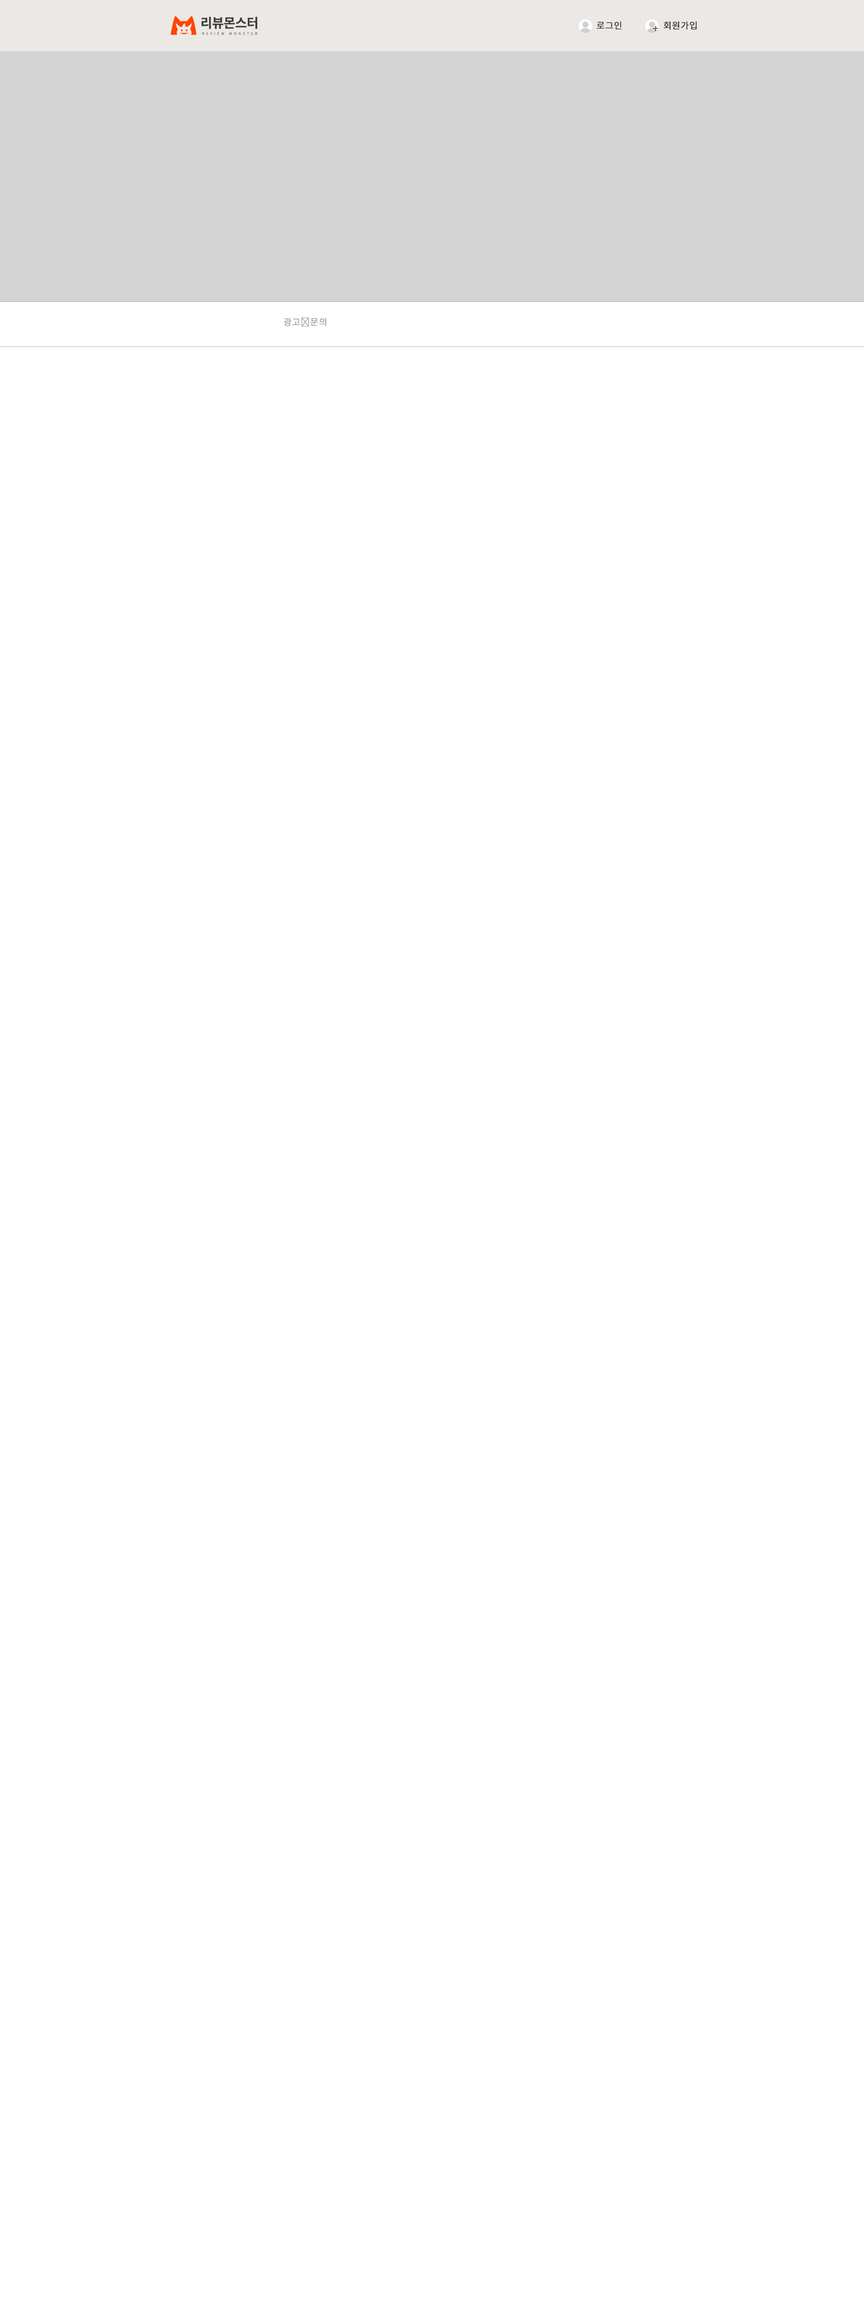
<style>
.page{position:relative;width:864px;height:2324px;background:#ffffff}
.page>*{position:absolute;margin:0}
.t1{font:9px "NotoSansKR-Regular";letter-spacing:0.02em;color:#333333;font-weight:bold}
.t2{font:9px "NotoSansKR-Regular";letter-spacing:0.02em;color:#a0a0a0;font-weight:bold}
</style>
<div class="page">
<p class="t1" style="left:597px;top:21px;width:24px;height:9px">로그인</p>
<p class="t1" style="left:664px;top:21px;width:33px;height:9px">회원가입</p>
<p class="t2" style="left:284px;top:317px;width:42px;height:10px">광고 문의</p>
</div>
